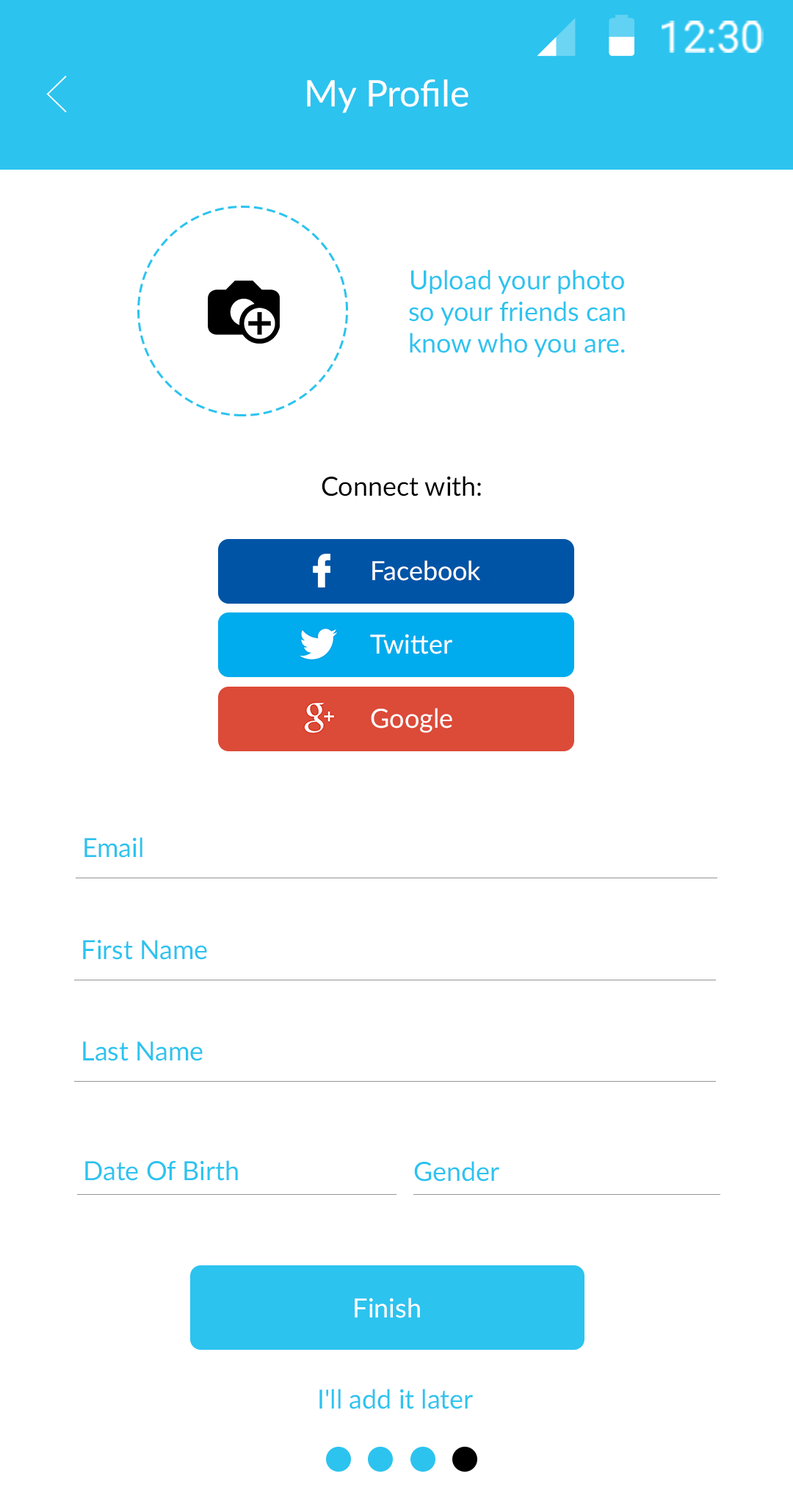
<style>
.page{position:relative;width:793px;height:1504px;background:#ffffff}
.page>*{position:absolute;margin:0}
.t1{font:42.2px "Roboto-Regular";color:#ffffff}
.t2{font:36.7px "Lato-Regular";color:#ffffff}
.t3{font:26.4px "Lato-Regular";color:#2cc3ef}
.t4{font:26.4px "Lato-Regular";color:#000000}
.t5{font:26.4px "Lato-Regular";color:#ffffff}
</style>
<div class="page">
<p class="t1" style="left:662px;top:21px;width:102px;height:32px">12:30</p>
<p class="t2" style="left:307px;top:79px;width:161px;height:34px">My Profile</p>
<p class="t3" style="left:409px;top:269px;width:216px;height:89px;text-align:center">Upload your photo <br>so your friends can <br>know who you are.</p>
<p class="t4" style="left:322px;top:476px;width:159px;height:20px">Connect with:</p>
<p class="t5" style="left:372px;top:560px;width:108px;height:21px">Facebook</p>
<p class="t5" style="left:370px;top:634px;width:82px;height:20px">Twitter</p>
<p class="t5" style="left:371px;top:708px;width:81px;height:25px">Google</p>
<p class="t3" style="left:84px;top:837px;width:58px;height:21px">Email</p>
<p class="t3" style="left:83px;top:939px;width:124px;height:21px">First Name</p>
<p class="t3" style="left:83px;top:1041px;width:120px;height:20px">Last Name</p>
<p class="t3" style="left:85px;top:1160px;width:153px;height:21px">Date Of Birth</p>
<p class="t3" style="left:414px;top:1161px;width:85px;height:20px">Gender</p>
<p class="t5" style="left:355px;top:1297px;width:65px;height:21px">Finish</p>
<p class="t3" style="left:319px;top:1388px;width:154px;height:21px">I'll add it later</p>
</div>
